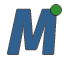
<style>
.page{position:relative;width:64px;height:64px;background:#ffffff}
.page>*{position:absolute;margin:0}
.t1{font:64px "FiraSans-BoldItalic";color:#306090}
</style>
<div class="page">
<p class="t1" style="left:7px;top:9px;width:49px;height:45px">M</p>
</div>
